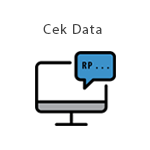
<style>
.page{position:relative;width:150px;height:150px;background:#ffffff}
.page>*{position:absolute;margin:0}
.t1{font:13.9px "MyriadPro-Regular";letter-spacing:0.08em;color:#454545}
</style>
<div class="page">
<p class="t1" style="left:43px;top:24px;width:59px;height:10px">Cek Data</p>
</div>
